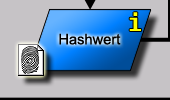
<style>
.page{position:relative;width:170px;height:100px;background:#c6c3c6}
.page>*{position:absolute;margin:0}
.t1{font:24px "Fixedsys";color:#ffff00}
.t2{font:14.7px "ArialMT";color:#000000}
</style>
<div class="page">
<p class="t1" style="left:129px;top:12px;width:12px;height:19px">i</p>
<p class="t2" style="left:59px;top:33px;width:62px;height:12px">Hashwert</p>
</div>
